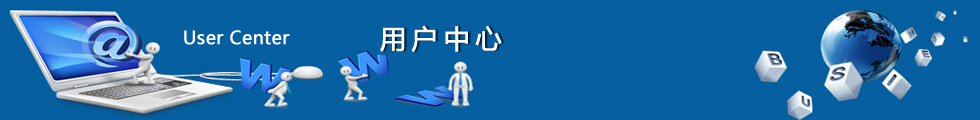
<style>
.page{position:relative;width:980px;height:120px;background:#065fa1}
.page>*{position:absolute;margin:0}
.t1{font:18px "MicrosoftYaHei";color:#ffffff;font-weight:bold}
.t2{font:26px "MicrosoftYaHei";letter-spacing:0.2em;color:#ffffff;font-weight:bold}
</style>
<div class="page">
<p class="t1" style="left:184px;top:30px;width:106px;height:15px">User Center</p>
<p class="t2" style="left:380px;top:25px;width:122px;height:28px">用户中心</p>
</div>
